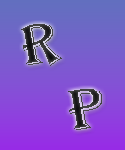
<style>
.page{position:relative;width:125px;height:150px}
.page>*{position:absolute;margin:0}
.t1{font:60px "Algerian"}
</style>
<div class="page">
<p class="t1" style="left:21px;top:24px;width:81px;height:106px;rotate:-10deg">R<br> P</p>
</div>
